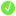
<style>
.page{position:relative;width:16px;height:16px;background:#6eea37}
.page>*{position:absolute;margin:0}
.t1{font:12px "KaiTi";color:#ffffff}
</style>
<div class="page">
<p class="t1" style="left:4px;top:2px;width:7px;height:10px">√</p>
</div>
